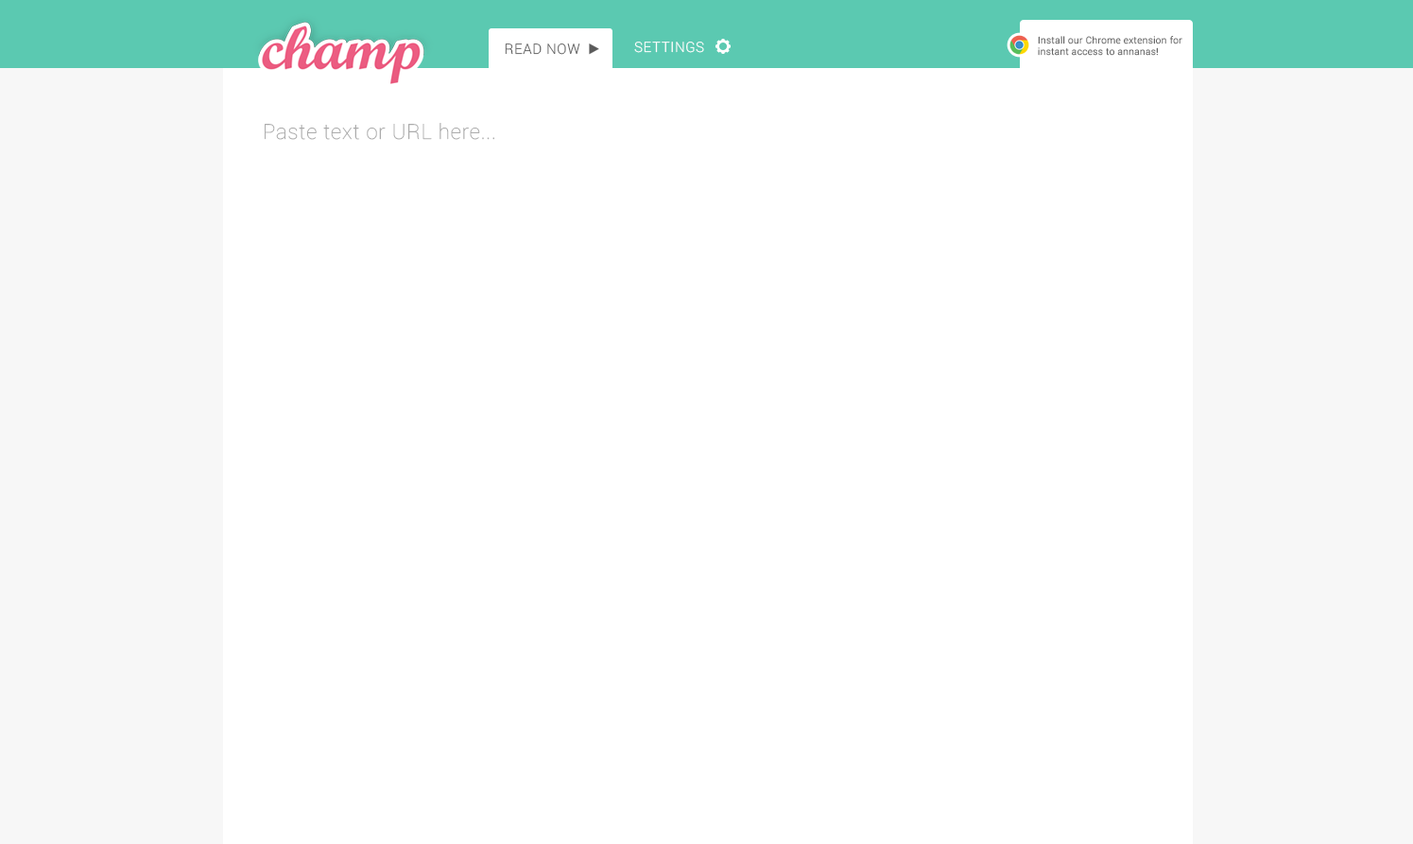
<style>
.page{position:relative;width:1413px;height:844px;background:#ffffff}
.page>*{position:absolute;margin:0}
.t1{font:14.2px "Roboto-Light";letter-spacing:0.04em;color:#ffffff}
.t2{font:9.5px "Roboto-Light";letter-spacing:0.04em;color:#646464}
.t3{font:14.2px "Roboto-Light";letter-spacing:0.04em;color:#595959}
.t4{font:20.8px "Roboto-Thin";letter-spacing:0.04em;color:#ababab}
</style>
<div class="page">
<p class="t1" style="left:634px;top:42px;width:70px;height:11px">SETTINGS</p>
<p class="t2" style="left:1038px;top:36px;width:144px;height:20px">Install our Chrome extension for<br>instant access to annanas!</p>
<p class="t3" style="left:505px;top:43px;width:75px;height:12px">READ NOW</p>
<p class="t4" style="left:265px;top:123px;width:229px;height:17px">Paste text or URL here...</p>
</div>
